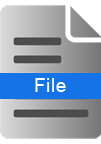
<style>
.page{position:relative;width:101px;height:144px}
.page>*{position:absolute;margin:0}
.t1{font:18.6px "ArialMT";letter-spacing:0.04em;color:#ffffff}
</style>
<div class="page">
<p class="t1" style="left:35px;top:78px;width:31px;height:14px">File</p>
</div>
